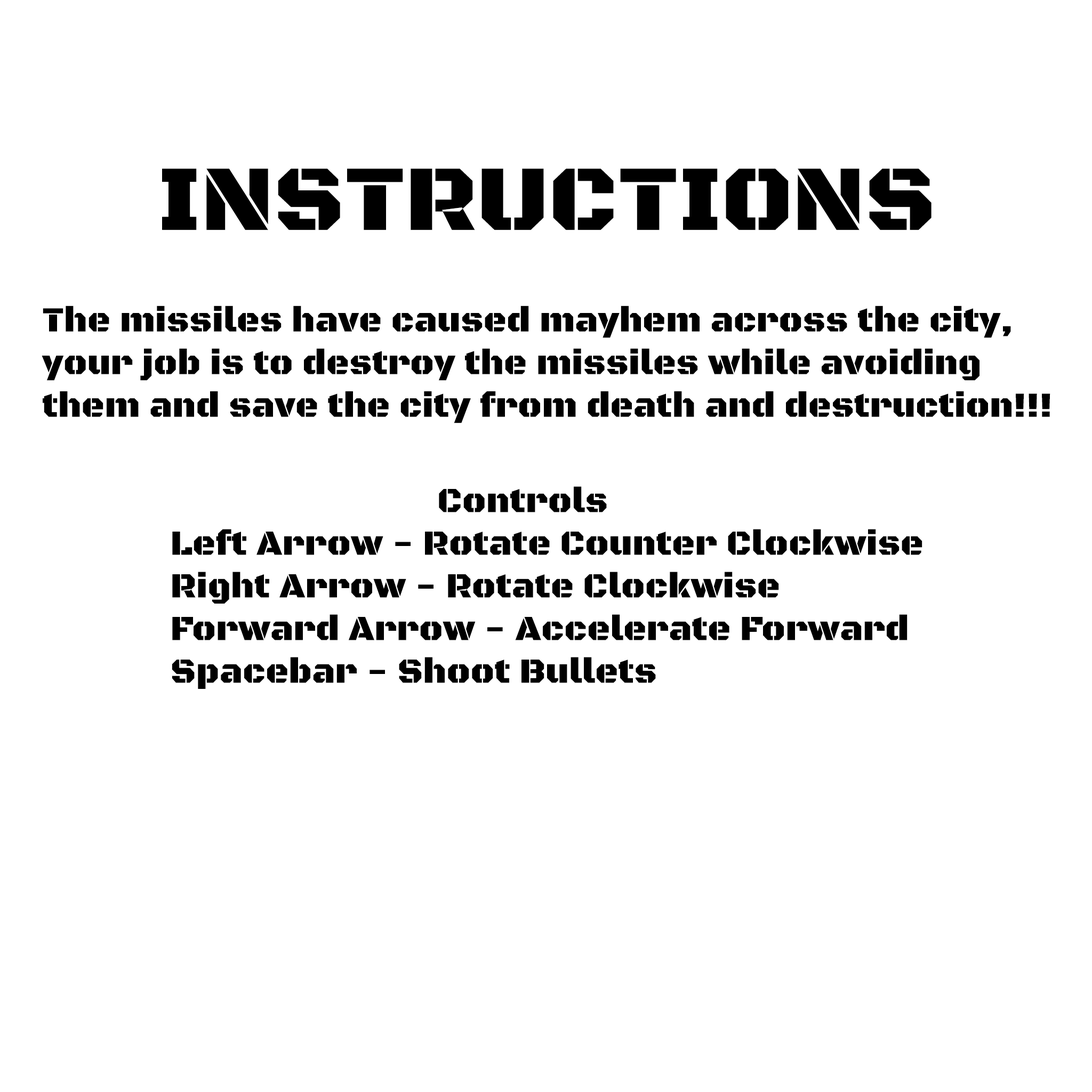
<style>
.page{position:relative;width:1092px;height:1092px;background:#ffffff}
.page>*{position:absolute;margin:0}
.t1{font:94.4px "BlackOpsOne-Regular";color:#000000;scale:1.04 1}
.t2{font:35.5px "BlackOpsOne-Regular";color:#000000}
</style>
<div class="page">
<p class="t1" style="left:162px;top:168px;width:769px;height:62px">INSTRUCTIONS</p>
<p class="t2" style="left:42px;top:306px;width:1008px;height:117px">The missiles have caused mayhem across the city,<br>your job is to destroy the missiles while avoiding<br>them and save the city from death and destruction!!!</p>
<p class="t2" style="left:172px;top:486px;width:750px;height:203px">Controls<br>Left Arrow - Rotate Counter Clockwise<br>Right Arrow - Rotate Clockwise<br>Forward Arrow - Accelerate Forward<br>Spacebar - Shoot Bullets</p>
</div>
